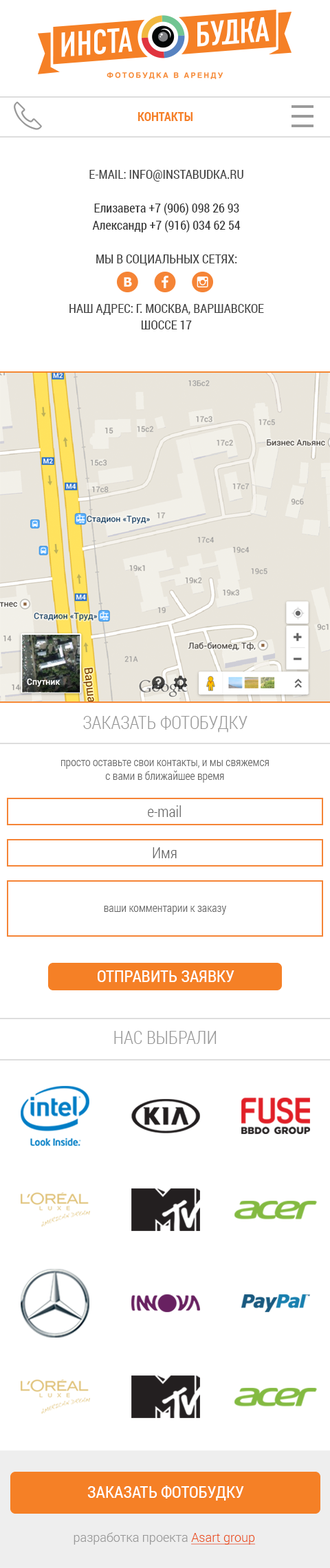
<style>
.page{position:relative;width:330px;height:1568px;background:#ffffff}
.page>*{position:absolute;margin:0}
.t1{font:12.4px "RobotoCondensed-Bold";color:#f58026;text-transform:uppercase}
.t2{font:12.4px/16.5px "RobotoCondensed-Regular";color:#414141;text-transform:uppercase}
.t3{font:12.4px/17.2px "RobotoCondensed-Regular";color:#333333}
.t4{font:17.9px "RobotoCondensed-Light";color:#999999;text-transform:uppercase}
.t5{font:11px "RobotoCondensed-Light";color:#666666}
.t6{font:15.1px "RobotoCondensed-Light";color:#666666}
.t7{font:16.5px "RobotoCondensed-Regular";color:#ffffff;text-transform:uppercase}
.t8{font:12.4px "Roboto-Light";color:#999999}
.t9{font:12.4px "Roboto-Light";color:#e94e1b;text-decoration:underline}
</style>
<div class="page">
<p class="t1" style="left:138px;top:112px;width:55px;height:9px">контакты</p>
<p class="t2" style="left:69px;top:170px;width:195px;height:159px;text-align:center">E-mail: info@instabudka.ru<br><br><span class="t3">Елизавета +7 (906) 098 26 93<br>Александр +7 (916) 034 62 54<br><br></span>Мы в социальных сетях: <br><br><br>Наш адрес: г. Москва, Варшавское шоссе 17</p>
<p class="t4" style="left:83px;top:716px;width:165px;height:16px">заказать фотобудку</p>
<p class="t5" style="left:61px;top:760px;width:208px;height:23px;text-align:center">просто оставьте свои контакты, и мы свяжемся с вами в ближайшее время</p>
<p class="t6" style="left:148px;top:805px;width:33px;height:12px">e-mail</p>
<p class="t6" style="left:153px;top:847px;width:24px;height:11px">Имя</p>
<p class="t5" style="left:104px;top:906px;width:122px;height:9px">ваши комментарии к заказу</p>
<p class="t7" style="left:98px;top:970px;width:137px;height:12px">отправить заявку</p>
<p class="t4" style="left:114px;top:1031px;width:103px;height:13px">нас выбрали</p>
<p class="t7" style="left:87px;top:1485px;width:157px;height:16px">заказать фотобудку</p>
<p class="t8" style="left:74px;top:1532px;width:182px;height:13px">разработка проекта <span class="t9">Asart group</span></p>
</div>
